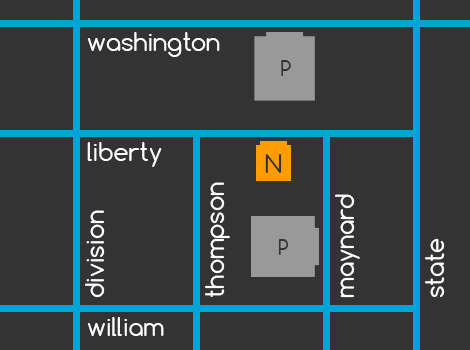
<style>
.page{position:relative;width:470px;height:350px;background:#333333}
.page>*{position:absolute;margin:0}
.t1{font:24.1px "Comfortaa";color:#ffffff}
.t2{font:20.3px "Comfortaa";color:#333333}
.t3{font:24px "Comfortaa";color:#333333}
</style>
<div class="page">
<p class="t1" style="left:87px;top:32px;width:133px;height:25px">washington</p>
<p class="t2" style="left:281px;top:60px;width:10px;height:16px">P</p>
<p class="t1" style="left:87px;top:142px;width:75px;height:25px">liberty</p>
<p class="t3" style="left:265px;top:154px;width:17px;height:19px">N</p>
<p class="t1" style="left:205px;top:182px;width:25px;height:115px;rotate:-90deg">thompson</p>
<p class="t1" style="left:335px;top:194px;width:25px;height:104px;rotate:-90deg">maynard</p>
<p class="t1" style="left:85px;top:210px;width:20px;height:88px;rotate:-90deg">division</p>
<p class="t2" style="left:278px;top:239px;width:11px;height:16px">P</p>
<p class="t1" style="left:425px;top:238px;width:20px;height:60px;rotate:-90deg">state</p>
<p class="t1" style="left:87px;top:317px;width:77px;height:19px">william</p>
</div>
